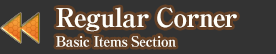
<style>
.page{position:relative;width:276px;height:54px;background:#333333}
.page>*{position:absolute;margin:0}
.t1{font:14px/30px "RyuminPro-ExBold";letter-spacing:-0.04em;color:#fffffa}
.t2{font:26px/30px "RyuminPro-ExBold";letter-spacing:-0.04em;color:#fffffa}
</style>
<div class="page">
<p class="t1" style="left:56px;top:7px;width:181px;height:40px"><span class="t2">Regular Corner<br></span>Basic Items Section</p>
</div>
